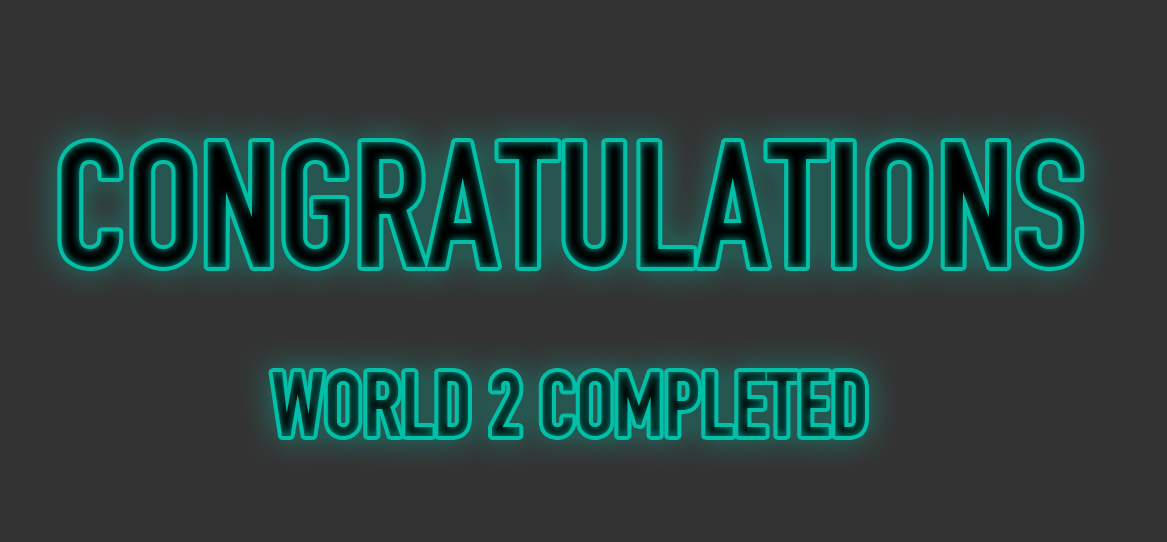
<style>
.page{position:relative;width:1167px;height:542px;background:#333333}
.page>*{position:absolute;margin:0}
.t1{font:175.4px "DINEngschrift"}
.t2{font:90px "DINEngschrift";color:#013831}
</style>
<div class="page">
<p class="t1" style="left:61px;top:142px;width:1020px;height:125px">CONGRATULATIONS</p>
<p class="t2" style="left:272px;top:372px;width:593px;height:64px">WORLD 2 COMPLETED</p>
</div>
